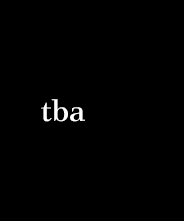
<style>
.page{position:relative;width:184px;height:221px;background:#000000}
.page>*{position:absolute;margin:0}
.t1{font:30px "Vinegar";color:#ffffff}
</style>
<div class="page">
<p class="t1" style="left:41px;top:99px;width:44px;height:23px">tba</p>
</div>
